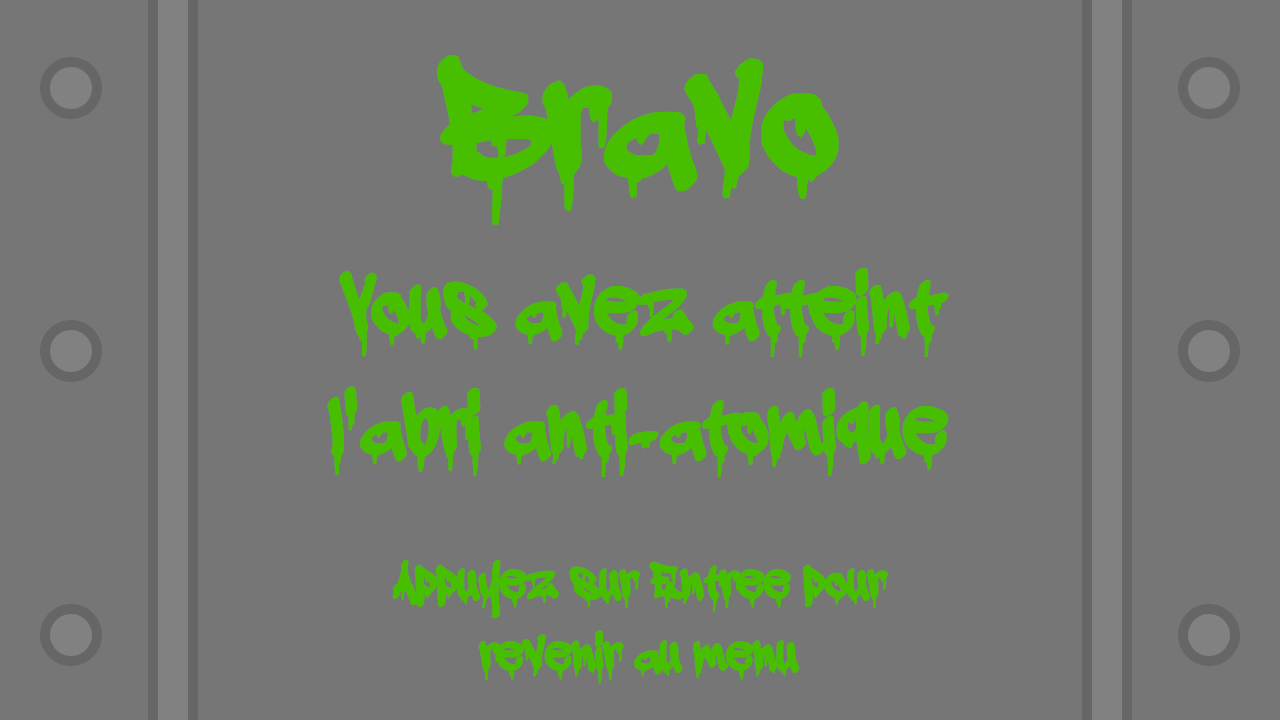
<style>
.page{position:relative;width:1280px;height:720px;background:#767676}
.page>*{position:absolute;margin:0}
.t1{font:200px "adrippingmarker";color:#48be00;font-weight:bold}
.t2{font:100px "adrippingmarker";color:#48be00;font-weight:bold}
.t3{font:60px "adrippingmarker";color:#48be00;font-weight:bold}
</style>
<div class="page">
<p class="t1" style="left:437px;top:55px;width:402px;height:170px">Bravo</p>
<p class="t2" style="left:327px;top:267px;width:622px;height:210px;text-align:center">Vous avez atteint l'abri anti-atomique</p>
<p class="t3" style="left:392px;top:559px;width:496px;height:125px;text-align:center">Appuyez sur Entree pour revenir au menu</p>
</div>
